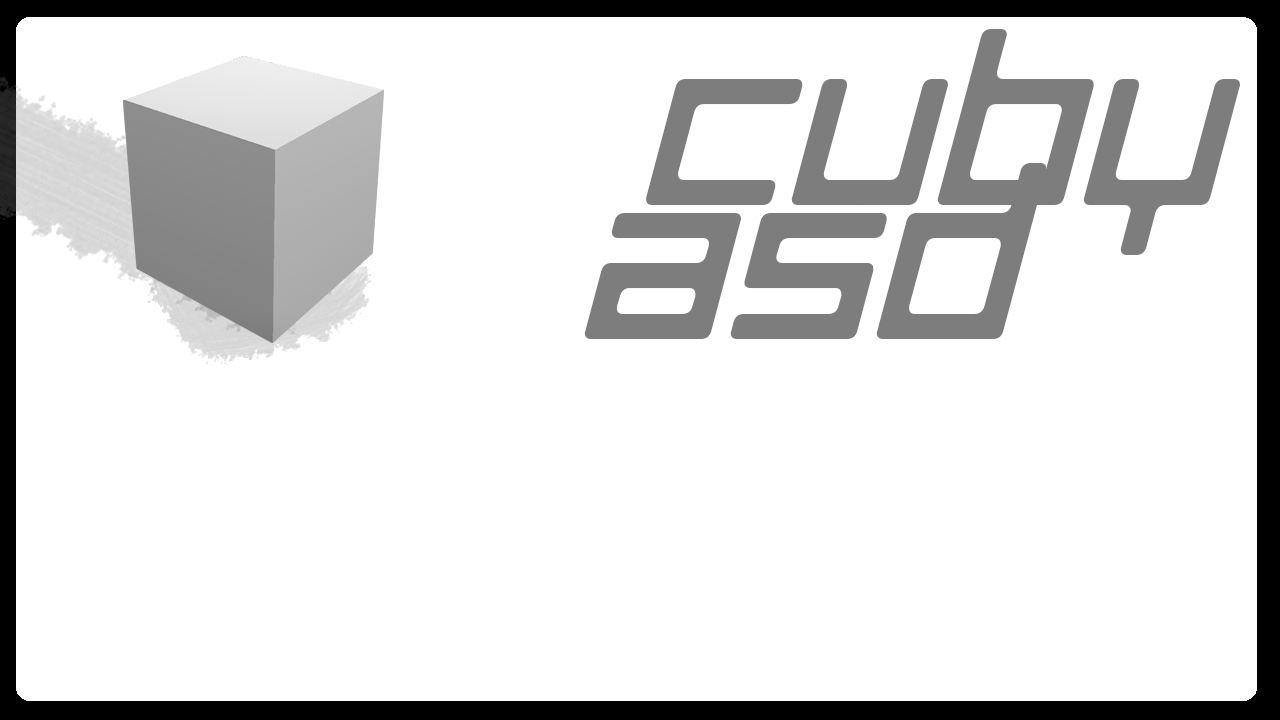
<style>
.page{position:relative;width:1280px;height:720px;background:#ffffff}
.page>*{position:absolute;margin:0}
.t1{font:226.6px "LuggageRoundRegularOblique";color:#7d7d7d}
</style>
<div class="page">
<p class="t1" style="left:646px;top:28px;width:594px;height:227px">Cuby</p>
<p class="t1" style="left:584px;top:162px;width:463px;height:177px">asdOuchP</p>
</div>
